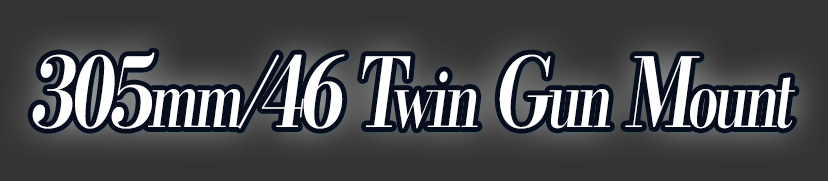
<style>
.page{position:relative;width:828px;height:181px;background:#333333}
.page>*{position:absolute;margin:0}
.t1{font:96px "KochoStd-Heavy";letter-spacing:-0.08em;color:#ffffff;font-style:italic;scale:0.74 1}
.t2{font:76.8px "KochoStd-Heavy";letter-spacing:-0.08em;color:#ffffff;font-style:italic;scale:0.74 1}
</style>
<div class="page">
<p class="t1" style="left:32px;top:52px;width:763px;height:77px">305<span class="t2">mm</span>/46 T<span class="t2">win</span> G<span class="t2">un</span> M<span class="t2">ount</span></p>
</div>
